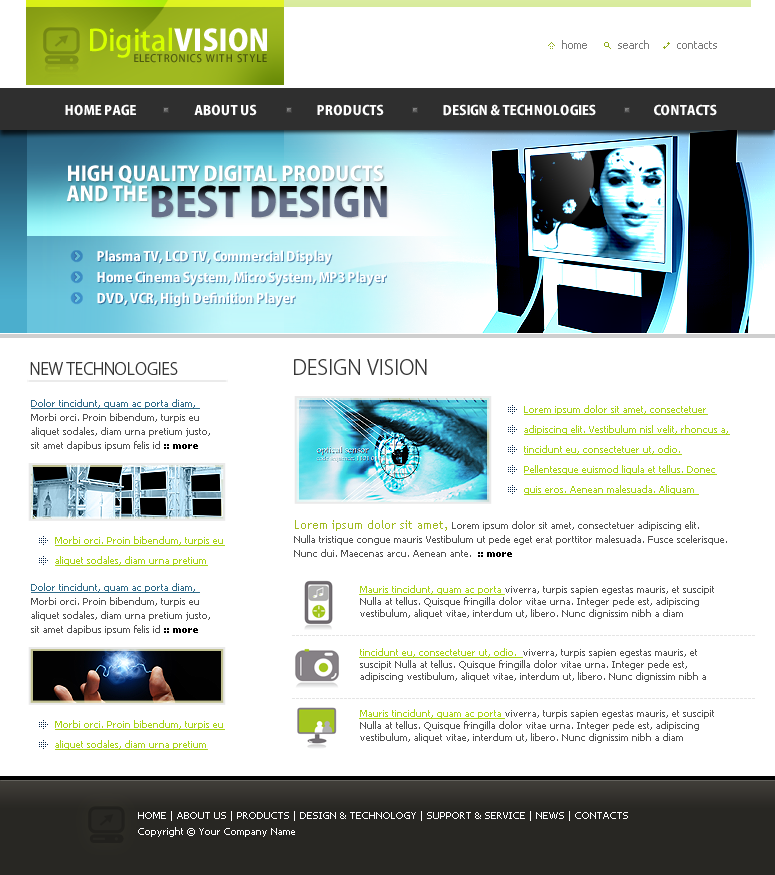
<style>
.page{position:relative;width:775px;height:875px;background:#ffffff}
.page>*{position:absolute;margin:0}
.t1{font:29px "KozGoPro-Medium";color:#d6ff00}
.t2{font:29px "KozGoPro-Heavy";color:#ffffff}
.t3{font:11px "Tahoma";color:#7b7b7b}
.t4{font:10px "KozGoPro-Medium";letter-spacing:0.08em;color:#4e5b0f}
.t5{font:13px "KozGoPro-Heavy";color:#ffffff}
.t6{font:20px "KozGoPro-Heavy";color:#ffffff}
.t7{font:40px "KozGoPro-Heavy"}
.t8{font:16px "KozGoPro-Light";color:#363636}
.t9{font:20px "KozGoPro-Light";color:#363636}
.t10{font:10px/14px "Tahoma";color:#535353}
.t11{font:10px/14px "Tahoma";color:#306b89;text-decoration:underline}
.t12{font:10px/14px "Tahoma-Bold";color:#000000}
.t13{font:10px/20px "Tahoma";color:#a8d217;text-decoration:underline}
.t14{font:12px/14px "TrebuchetMS";color:#a0b920}
.t15{font:10px/12px "Tahoma";color:#535353}
.t16{font:10px/12px "Tahoma";color:#a8d217;text-decoration:underline}
.t17{font:10px "Tahoma";color:#e5e5e5}
.t18{font:10px/16px "Tahoma";color:#ffffff}
</style>
<div class="page">
<p class="t1" style="left:90px;top:27px;width:177px;height:31px">Digital<span class="t2">VISION</span></p>
<p class="t3" style="left:562px;top:40px;width:25px;height:9px">home</p>
<p class="t3" style="left:618px;top:40px;width:31px;height:9px">search</p>
<p class="t3" style="left:677px;top:41px;width:40px;height:8px">contacts</p>
<p class="t4" style="left:134px;top:54px;width:133px;height:9px">ELECTRONICS WITH STYLE</p>
<p class="t5" style="left:65px;top:104px;width:71px;height:12px">HOME PAGE</p>
<p class="t5" style="left:194px;top:104px;width:63px;height:12px">ABOUT US</p>
<p class="t5" style="left:317px;top:104px;width:67px;height:12px">PRODUCTS</p>
<p class="t5" style="left:443px;top:104px;width:153px;height:12px">DESIGN &amp; TECHNOLOGIES</p>
<p class="t5" style="left:654px;top:104px;width:63px;height:12px">CONTACTS</p>
<p class="t6" style="left:68px;top:165px;width:315px;height:19px">HIGH QUALITY DIGITAL PRODUCTS</p>
<p class="t6" style="left:66px;top:185px;width:82px;height:17px">AND THE</p>
<p class="t7" style="left:151px;top:185px;width:236px;height:33px">BEST DESIGN</p>
<p class="t5" style="left:97px;top:250px;width:235px;height:15px">Plasma TV, LCD TV, Commercial Display</p>
<p class="t5" style="left:97px;top:271px;width:289px;height:15px">Home Cinema System, Micro System, MP3 Player</p>
<p class="t5" style="left:97px;top:292px;width:198px;height:15px">DVD, VCR, High Definition Player</p>
<p class="t8" style="left:30px;top:362px;width:148px;height:13px">NEW TECHNOLOGIES</p>
<p class="t9" style="left:294px;top:359px;width:133px;height:16px">DESIGN VISION</p>
<p class="t10" style="left:31px;top:399px;width:179px;height:52px"><span class="t11">Dolor tincidunt, quam ac porta diam, <br></span>Morbi orci. Proin bibendum, turpis eu aliquet sodales, diam urna pretium justo, sit amet dapibus ipsum felis id <span class="t12">:: more</span></p>
<p class="t13" style="left:524px;top:405px;width:206px;height:90px">Lorem ipsum dolor sit amet, consectetuer adipiscing elit. Vestibulum nisl velit, rhoncus a, tincidunt eu, consectetuer ut, odio. Pellentesque euismod ligula et tellus. Donec quis eros. Aenean malesuada. Aliquam</p>
<p class="t10" style="left:294px;top:520px;width:433px;height:37px"><span class="t14">Lorem ipsum dolor sit amet, </span>Lorem ipsum dolor sit amet, consectetuer adipiscing elit. <br>Nulla tristique congue mauris Vestibulum ut pede eget erat porttitor malesuada. Fusce scelerisque. Nunc dui. Maecenas arcu. Aenean ante.  <span class="t12">:: more</span></p>
<p class="t13" style="left:55px;top:536px;width:170px;height:30px">Morbi orci. Proin bibendum, turpis eu aliquet sodales, diam urna pretium</p>
<p class="t10" style="left:31px;top:583px;width:179px;height:52px"><span class="t11">Dolor tincidunt, quam ac porta diam, <br></span>Morbi orci. Proin bibendum, turpis eu aliquet sodales, diam urna pretium justo, sit amet dapibus ipsum felis id <span class="t12">:: more</span></p>
<p class="t15" style="left:359px;top:585px;width:355px;height:34px"><span class="t16">Mauris tincidunt, quam ac porta </span>viverra, turpis sapien egestas mauris, et suscipit Nulla at tellus. Quisque fringilla dolor vitae urna. Integer pede est, adipiscing vestibulum, aliquet vitae, interdum ut, libero. Nunc dignissim nibh a diam</p>
<p class="t17" style="left:292px;top:635px;width:463px;height:1px">--------------------------------------------------------------------------------------------------------------------</p>
<p class="t15" style="left:359px;top:648px;width:347px;height:34px"><span class="t13">tincidunt eu, consectetuer ut, odio.  </span>viverra, turpis sapien egestas mauris, et suscipit Nulla at tellus. Quisque fringilla dolor vitae urna. Integer pede est, adipiscing vestibulum, aliquet vitae, interdum ut, libero. Nunc dignissim nibh a</p>
<p class="t17" style="left:292px;top:698px;width:463px;height:1px">--------------------------------------------------------------------------------------------------------------------</p>
<p class="t15" style="left:359px;top:709px;width:355px;height:34px"><span class="t16">Mauris tincidunt, quam ac porta </span>viverra, turpis sapien egestas mauris, et suscipit Nulla at tellus. Quisque fringilla dolor vitae urna. Integer pede est, adipiscing vestibulum, aliquet vitae, interdum ut, libero. Nunc dignissim nibh a diam</p>
<p class="t13" style="left:55px;top:720px;width:170px;height:30px">Morbi orci. Proin bibendum, turpis eu aliquet sodales, diam urna pretium</p>
<p class="t18" style="left:138px;top:811px;width:490px;height:26px">HOME | ABOUT US | PRODUCTS | DESIGN &amp; TECHNOLOGY | SUPPORT &amp; SERVICE | NEWS | CONTACTS<br>Copyright © Your Company Name</p>
</div>
